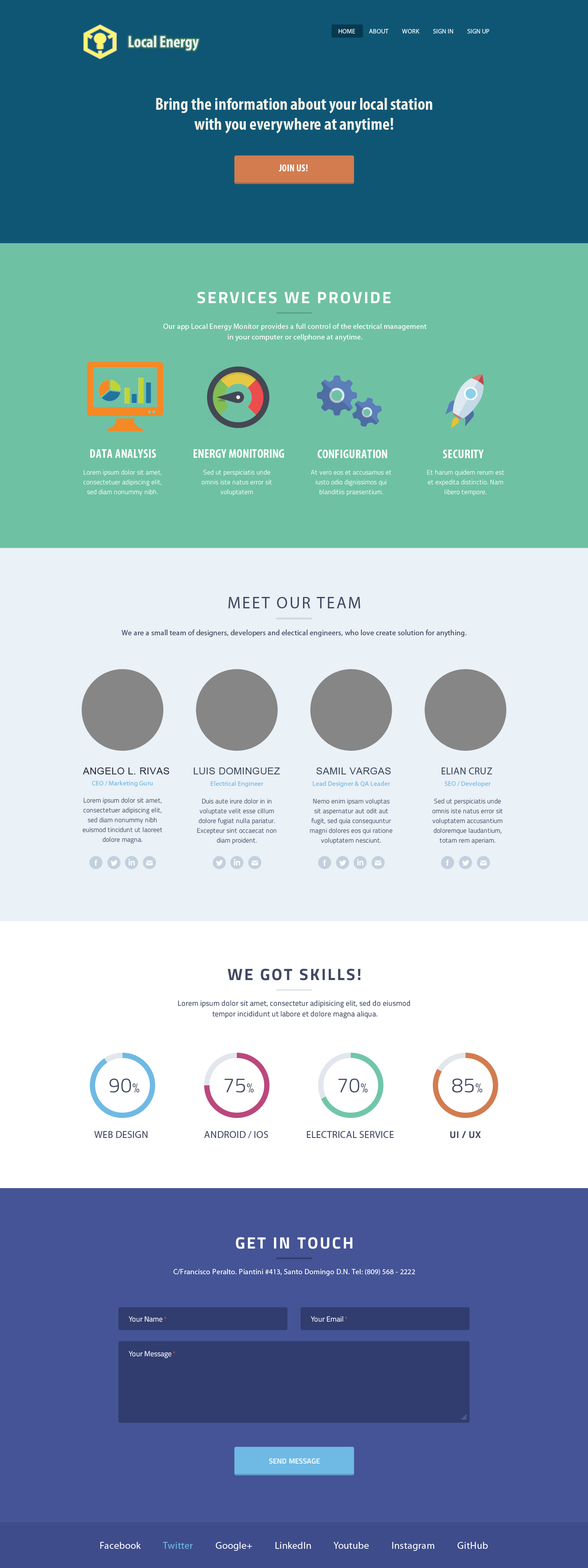
<style>
.page{position:relative;width:588px;height:1568px;background:#eaf1f7}
.page>*{position:absolute;margin:0}
.t1{font:6.5px "MyriadPro-Regular";color:#ffffff;text-transform:uppercase}
.t2{font:16.3px "MyriadPro-BoldCond";color:#e8f1f5}
.t3{font:17.2px/19.9px "MyriadPro-BoldCond";color:#f6f2ea}
.t4{font:9.8px "MyriadPro-BoldCond";letter-spacing:0.02em;color:#ffffff}
.t5{font:16.3px "TitilliumWeb-Bold";letter-spacing:0.1em;color:#ffffff}
.t6{font:7.3px/10.6px "MyriadPro-Regular";letter-spacing:0.02em;color:#ffffff}
.t7{font:12.2px "MyriadPro-BoldCond";letter-spacing:0.02em;color:#ffffff;text-transform:uppercase}
.t8{font:6.5px/9.8px "TitilliumWeb-Light";letter-spacing:0.02em;color:#ffffff}
.t9{font:16.8px "MyriadPro-Regular";letter-spacing:0.1em;color:#414860;scale:0.97 1}
.t10{font:7.6px "MyriadPro-Regular";letter-spacing:0.02em;color:#414860;scale:0.97 1}
.t11{font:9.8px "ArialMT";letter-spacing:0.02em;color:#2c2d3f;text-transform:uppercase}
.t12{font:9.8px "ArialMT";letter-spacing:0.02em;color:#414960;text-transform:uppercase}
.t13{font:9.8px "MyriadPro-Regular";letter-spacing:0.02em;color:#414960;text-transform:uppercase}
.t14{font:6.5px "MyriadPro-Regular";letter-spacing:0.02em;color:#6fb8e5}
.t15{font:6.5px/9.8px "TitilliumWeb-Light";letter-spacing:0.02em;color:#414960}
.t16{font:16.3px "TitilliumWeb-Bold";letter-spacing:0.1em;color:#414960}
.t17{font:7.3px/10.6px "TitilliumWeb-Regular";letter-spacing:0.02em;color:#414960}
.t18{font:20.4px "TitilliumWeb-Light";letter-spacing:0.02em;color:#414960;text-transform:uppercase}
.t19{font:13.1px "TitilliumWeb-Light";letter-spacing:0.02em;color:#414960;text-transform:uppercase}
.t20{font:9.8px "TitilliumWeb-Bold";letter-spacing:0.02em;color:#414960;text-transform:uppercase}
.t21{font:7.3px "MyriadPro-Regular";letter-spacing:0.02em;color:#ffffff}
.t22{font:7.3px "TitilliumWeb-Regular";color:#ffffff}
.t23{font:6.5px "ArialMT";color:#ff4444}
.t24{font:7.3px "TitilliumWeb-SemiBold";letter-spacing:0.02em;color:#ffffff}
.t25{font:9.8px "MyriadPro-Regular";letter-spacing:0.02em;color:#ffffff}
.t26{font:9.8px "MyriadPro-Regular";letter-spacing:0.02em;color:#6fb9e5}
</style>
<div class="page">
<p class="t1" style="left:338px;top:29px;width:151px;height:4px">HomE           About           WORK           Sign in           sign up</p>
<p class="t2" style="left:129px;top:35px;width:70px;height:16px">Local Energy</p>
<p class="t3" style="left:156px;top:98px;width:276px;height:35px;text-align:center">Bring the information about your local station<br>with you everywhere at anytime!</p>
<p class="t4" style="left:279px;top:164px;width:29px;height:7px">JOIN US!</p>
<p class="t5" style="left:197px;top:292px;width:193px;height:12px">SERVICES WE PROVIDE</p>
<p class="t6" style="left:163px;top:324px;width:263px;height:18px;text-align:center">Our app Local Energy Monitor provides a full control of the electrical management<br>in your computer or cellphone at anytime.</p>
<p class="t7" style="left:90px;top:449px;width:66px;height:9px">Data analysis</p>
<p class="t7" style="left:193px;top:449px;width:91px;height:9px">Energy monitoring</p>
<p class="t7" style="left:317px;top:450px;width:70px;height:8px">configuration</p>
<p class="t7" style="left:442px;top:450px;width:41px;height:8px">Security</p>
<p class="t8" style="left:83px;top:470px;width:79px;height:26px;text-align:center">Lorem ipsum dolor sit amet, <br>consectetuer adipiscing elit, sed diam nonummy nibh.</p>
<p class="t8" style="left:201px;top:470px;width:71px;height:26px;text-align:center">Sed ut perspiciatis unde omnis iste natus error sit voluptatem</p>
<p class="t8" style="left:310px;top:470px;width:81px;height:26px;text-align:center">At vero eos et accusamus et iusto odio dignissimos qui blanditiis praesentium.</p>
<p class="t8" style="left:427px;top:470px;width:77px;height:26px;text-align:center">Et harum quidem rerum est et expedita distinctio. Nam libero tempore.</p>
<p class="t9" style="left:228px;top:597px;width:132px;height:11px">MEET OUR TEAM</p>
<p class="t10" style="left:122px;top:630px;width:344px;height:7px">We are a small team of designers, developers and electical engineers, who love create solution for anything.</p>
<p class="t11" style="left:83px;top:767px;width:86px;height:7px">ANGELO L. RIVAS</p>
<p class="t12" style="left:193px;top:767px;width:87px;height:7px">LUIS DOMINGUEZ</p>
<p class="t12" style="left:316px;top:767px;width:74px;height:7px">SAMIL VARGAS</p>
<p class="t13" style="left:441px;top:767px;width:51px;height:7px">ELIAN CRUZ</p>
<p class="t14" style="left:92px;top:781px;width:61px;height:6px">CEO / Marketing Guru</p>
<p class="t14" style="left:211px;top:781px;width:52px;height:6px">Electrical Engineer</p>
<p class="t14" style="left:313px;top:781px;width:77px;height:6px">Lead Designer &amp; QA Leader</p>
<p class="t14" style="left:444px;top:781px;width:46px;height:6px">SEO / Developer</p>
<p class="t15" style="left:82px;top:798px;width:80px;height:45px;text-align:center">Lorem ipsum dolor sit amet, <br>consectetuer adipiscing elit, sed diam nonummy nibh euismod tincidunt ut laoreet dolore magna.</p>
<p class="t15" style="left:197px;top:798px;width:79px;height:46px;text-align:center">Duis aute irure dolor in in voluptate velit esse cillum dolore fugiat nulla pariatur. Excepteur sint occaecat non diam proident.</p>
<p class="t15" style="left:310px;top:798px;width:82px;height:46px;text-align:center">Nemo enim ipsam voluptas sit aspernatur aut odit aut fugit, sed quia consequuntur magni dolores eos qui ratione voluptatem nesciunt.</p>
<p class="t15" style="left:432px;top:798px;width:70px;height:46px;text-align:center">Sed ut perspiciatis unde omnis iste natus error sit voluptatem accusantium doloremque laudantium, totam rem aperiam.</p>
<p class="t16" style="left:227px;top:969px;width:133px;height:11px">WE GOT SKILLS!</p>
<p class="t17" style="left:178px;top:1000px;width:232px;height:18px;text-align:center">Lorem ipsum dolor sit amet, consectetur adipisicing elit, sed do eiusmod <br>tempor incididunt ut labore et dolore magna aliqua.</p>
<p class="t18" style="left:109px;top:1078px;width:31px;height:15px">90<span class="t19">%</span></p>
<p class="t18" style="left:224px;top:1079px;width:30px;height:14px">75<span class="t19">%</span></p>
<p class="t18" style="left:338px;top:1078px;width:30px;height:15px">70<span class="t19">%</span></p>
<p class="t18" style="left:452px;top:1078px;width:30px;height:15px">85<span class="t19">%</span></p>
<p class="t13" style="left:94px;top:1131px;width:53px;height:7px">Web Design</p>
<p class="t13" style="left:204px;top:1131px;width:64px;height:7px">Android / ios</p>
<p class="t13" style="left:306px;top:1131px;width:87px;height:7px">Electrical service</p>
<p class="t20" style="left:450px;top:1131px;width:31px;height:7px">UI / UX</p>
<p class="t5" style="left:235px;top:1237px;width:117px;height:12px">GET IN TOUCH</p>
<p class="t21" style="left:173px;top:1269px;width:242px;height:7px">C/Francisco Peralto. Piantini #413, Santo Domingo D.N. Tel: (809) 568 - 2222</p>
<p class="t22" style="left:129px;top:1316px;width:37px;height:6px">Your Name <span class="t23">*</span></p>
<p class="t22" style="left:310px;top:1316px;width:37px;height:6px">Your Email <span class="t23">*</span></p>
<p class="t22" style="left:129px;top:1351px;width:46px;height:7px">Your Message <span class="t23">*</span></p>
<p class="t24" style="left:269px;top:1458px;width:51px;height:6px">SEND MESSAGE</p>
<p class="t25" style="left:100px;top:1542px;width:388px;height:9px">Facebook          <span class="t26">Twitter          </span>Google+          LinkedIn          Youtube          Instagram          GitHub</p>
</div>
